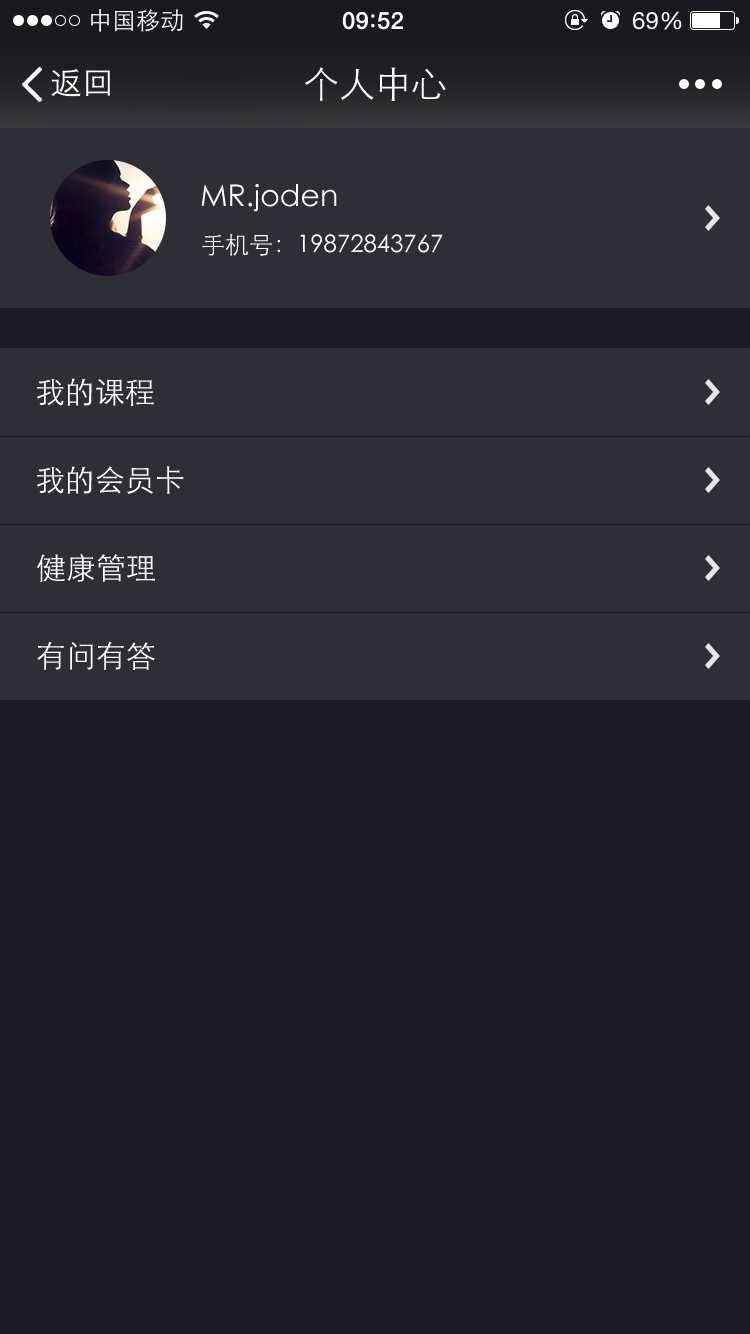
<style>
.page{position:relative;width:750px;height:1334px;background:#1d1c24}
.page>*{position:absolute;margin:0}
.t1{font:36px "STXihei";color:#ffffff}
.t2{font:30px "STXihei";color:#ffffff}
.t3{font:24px "STXihei";color:#ffffff}
</style>
<div class="page">
<p class="t1" style="left:304px;top:67px;width:142px;height:34px">个人中心</p>
<p class="t2" style="left:201px;top:184px;width:136px;height:28px">MR.joden</p>
<p class="t3" style="left:202px;top:233px;width:241px;height:23px">手机号：19872843767</p>
<p class="t2" style="left:37px;top:378px;width:117px;height:28px">我的课程</p>
<p class="t2" style="left:37px;top:466px;width:147px;height:28px">我的会员卡</p>
<p class="t2" style="left:36px;top:554px;width:119px;height:28px">健康管理</p>
<p class="t2" style="left:37px;top:641px;width:118px;height:29px">有问有答</p>
</div>
